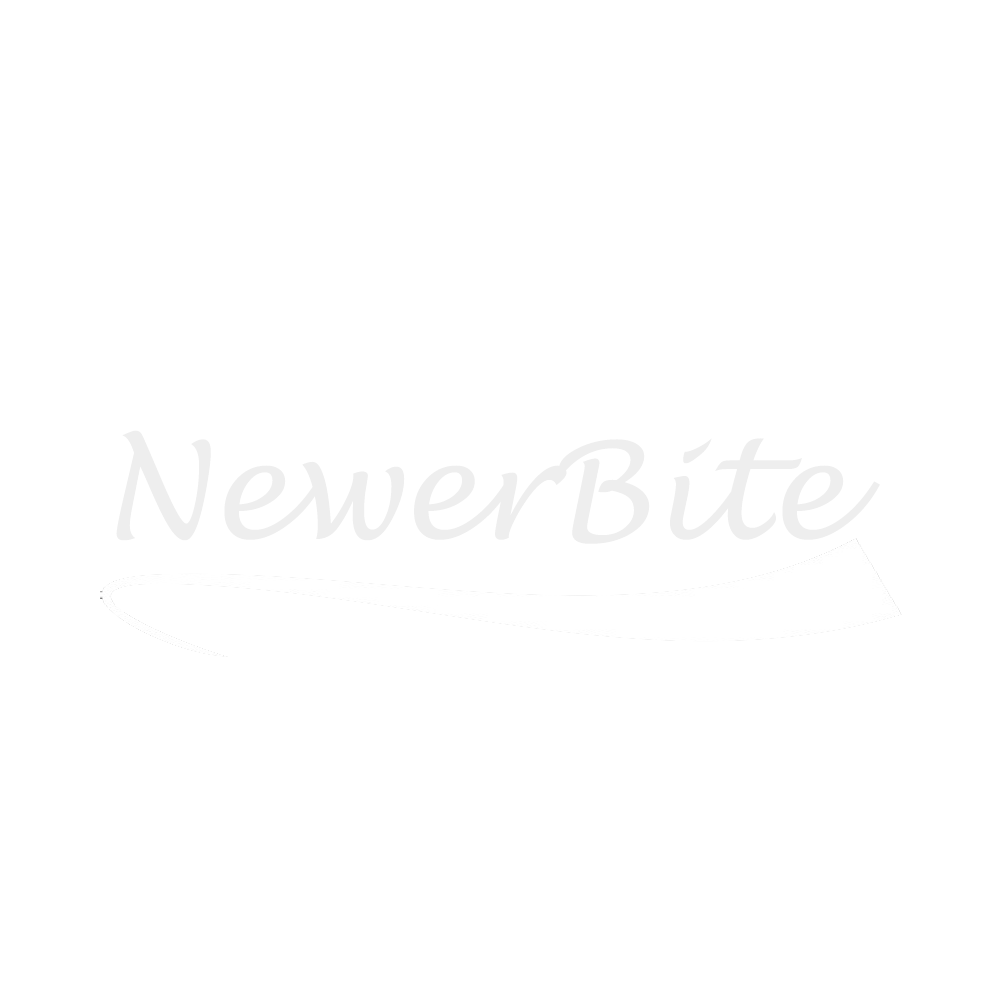
<style>
.page{position:relative;width:1000px;height:1000px;background:#ffffff}
.page>*{position:absolute;margin:0}
.t1{font:133.3px "LucidaHandwriting-Italic";color:#eeeeee}
</style>
<div class="page">
<p class="t1" style="left:116px;top:430px;width:764px;height:114px">NewerBite</p>
</div>
